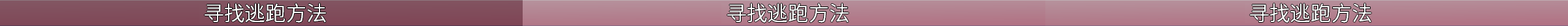
<style>
.page{position:relative;width:1568px;height:26px}
.page>*{position:absolute;margin:0}
.t1{font:20.6px "SourceHanSansSC-Normal";color:#ffffff}
</style>
<div class="page">
<p class="t1" style="left:204px;top:3px;width:122px;height:20px">寻找逃跑方法</p>
<p class="t1" style="left:727px;top:3px;width:122px;height:20px">寻找逃跑方法</p>
<p class="t1" style="left:1250px;top:3px;width:121px;height:20px">寻找逃跑方法</p>
</div>
